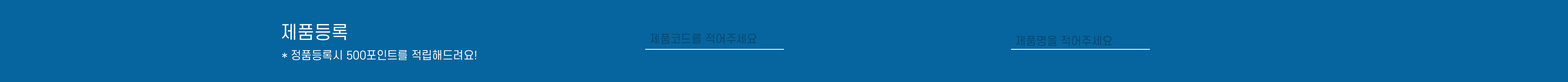
<style>
.page{position:relative;width:1568px;height:82px;background:#06659e}
.page>*{position:absolute;margin:0}
.t1{font:17.7px "S-CoreDream-4Regular";color:#ffffff}
.t2{font:10.9px "S-CoreDream-4Regular";color:#06456b}
.t3{font:10.9px "S-CoreDream-4Regular";color:#ffffff}
</style>
<div class="page">
<p class="t1" style="left:282px;top:24px;width:65px;height:16px">제품등록</p>
<p class="t2" style="left:651px;top:33px;width:105px;height:11px">제품코드를 적어주세요</p>
<p class="t2" style="left:1016px;top:36px;width:96px;height:10px">제품명을 적어주세요</p>
<p class="t3" style="left:282px;top:50px;width:194px;height:10px">* 정품등록시 500포인트를 적립해드려요!</p>
</div>
